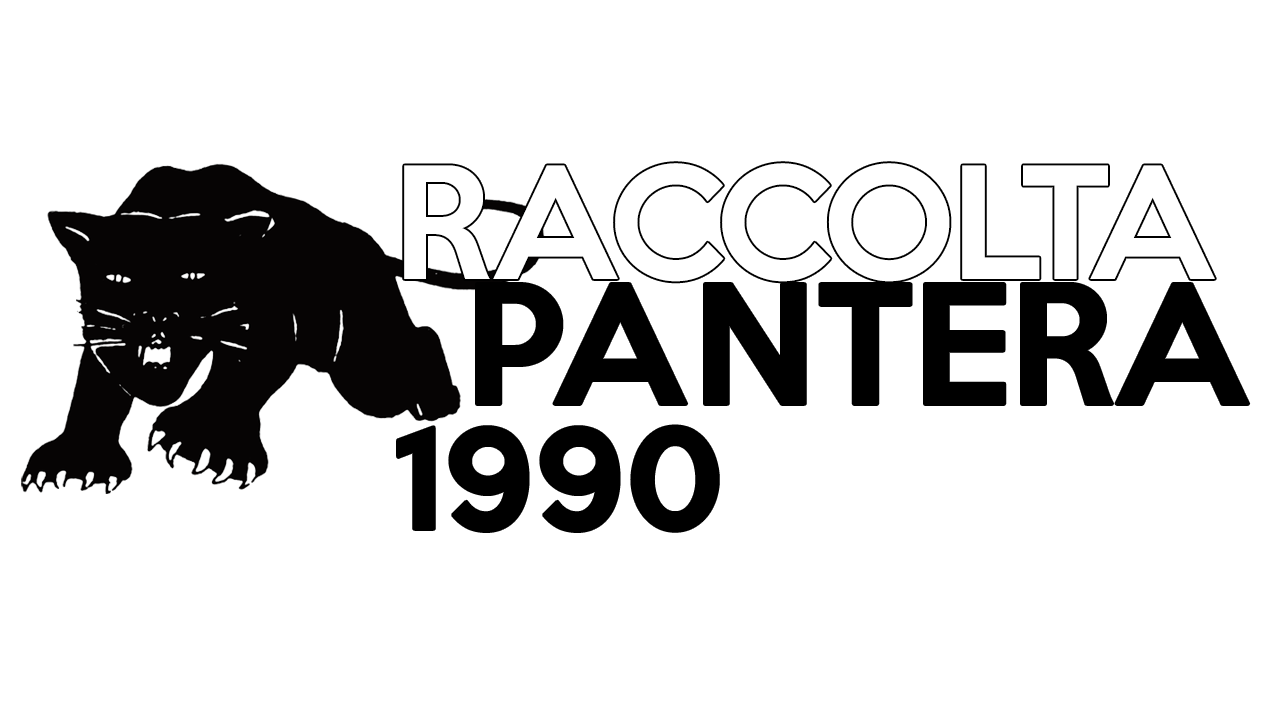
<style>
.page{position:relative;width:1280px;height:720px;background:#ffffff}
.page>*{position:absolute;margin:0}
.t1{font:141.7px/125px "KeepCalm-Medium";letter-spacing:-0.025em;color:#ffffff}
.t2{font:141.7px/125px "KeepCalm-Medium";color:#ffffff}
.t3{font:150px/125px "KeepCalm-Medium";letter-spacing:0.05em;color:#000000}
.t4{font:150px/125px "KeepCalm-Medium";color:#000000}
.t5{font:125px/125px "KeepCalm-Medium";color:#000000}
</style>
<div class="page">
<p class="t1" style="left:398px;top:163px;width:851px;height:368px"><span class="t2">RA</span>CCOLTA <br>  <span class="t3">PA</span><span class="t4">NTERA<br></span><span class="t5">1990</span></p>
</div>
